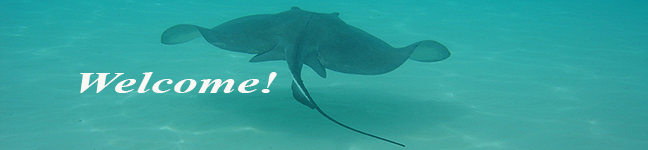
<style>
.page{position:relative;width:648px;height:150px}
.page>*{position:absolute;margin:0}
.t1{font:30px "TimesNewRomanPS-BoldItalicMT";color:#faf8f5;scale:1.67 1}
</style>
<div class="page">
<p class="t1" style="left:80px;top:72px;width:197px;height:21px">Welcome!</p>
</div>
